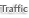
<style>
.page{position:relative;width:29px;height:18px;background:#ffffff}
.page>*{position:absolute;margin:0}
.t1{font:10px "AmiraParadiso";color:#646464}
</style>
<div class="page">
<p class="t1" style="left:0px;top:4px;width:28px;height:8px">Traffic</p>
</div>
